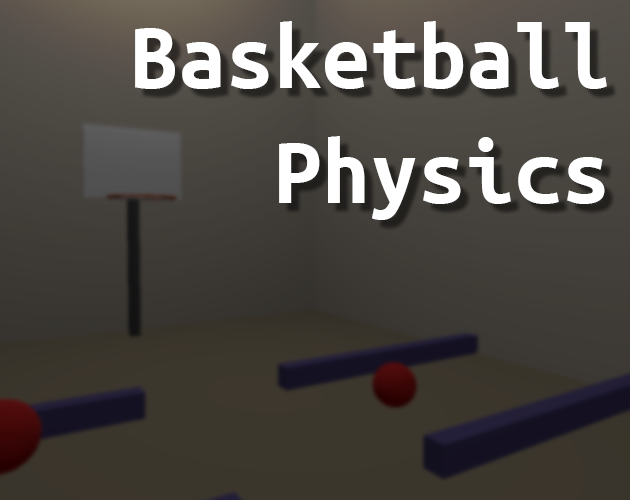
<style>
.page{position:relative;width:630px;height:500px}
.page>*{position:absolute;margin:0}
.t1{font:96px "UbuntuMono-Bold";color:#ffffff}
</style>
<div class="page">
<p class="t1" style="left:135px;top:21px;width:472px;height:199px;text-align:right">Basketball<br>Physics</p>
</div>
